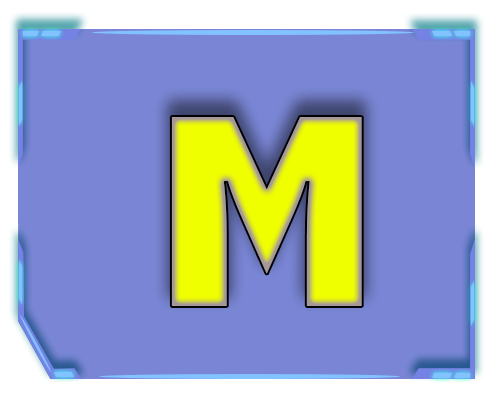
<style>
.page{position:relative;width:500px;height:400px;background:#7a86d5}
.page>*{position:absolute;margin:0}
.t1{font:277.8px "AbadiMT-CondensedExtraBold";color:#f0ff00;scale:1.27 1}
</style>
<div class="page">
<p class="t1" style="left:171px;top:117px;width:191px;height:189px">M</p>
</div>
